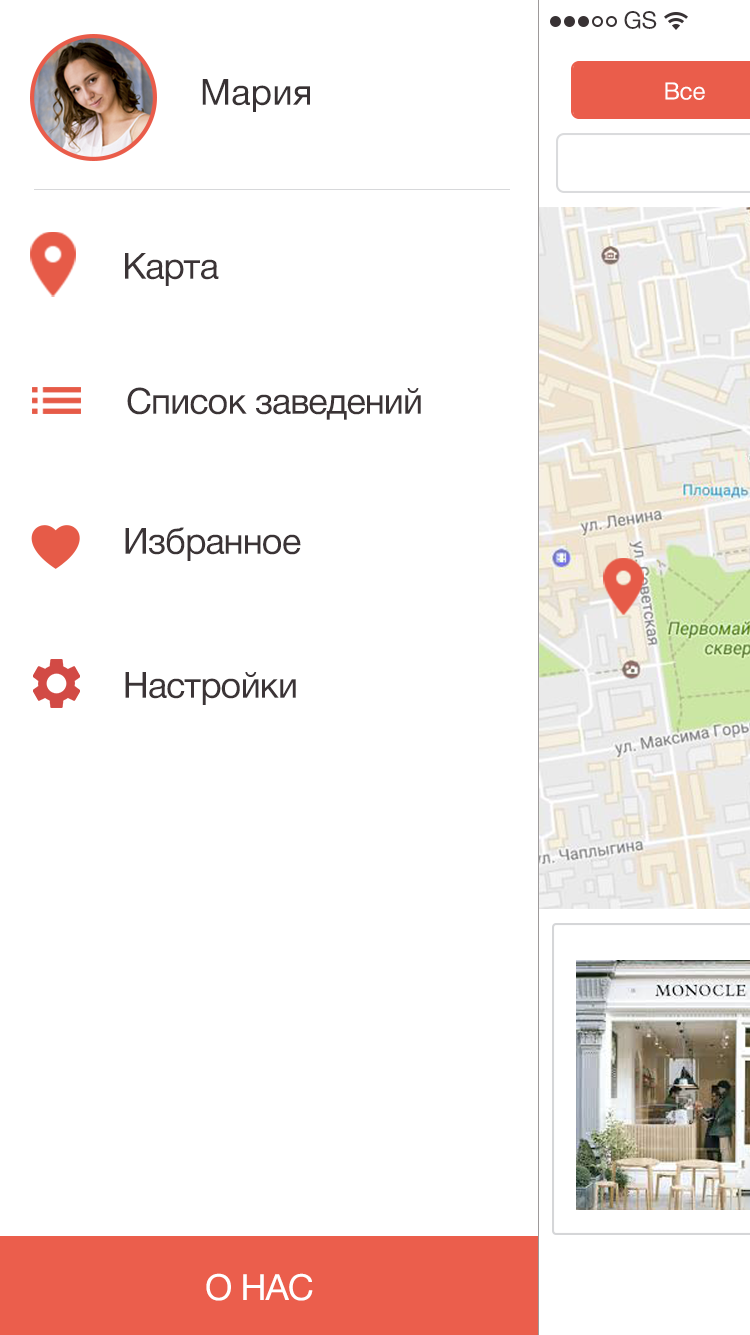
<style>
.page{position:relative;width:750px;height:1335px;background:#ffffff}
.page>*{position:absolute;margin:0}
.t1{font:24px "HelveticaNeueCyr-Roman";color:#383234}
.t2{font:36px "HelveticaNeueCyr-Roman";letter-spacing:0.016em;color:#383234}
.t3{font:24px "HelveticaNeueCyr-Roman";color:#ffffff}
.t4{font:36px "HelveticaNeueCyr-Roman";letter-spacing:-0.024em;color:#3b3436}
.t5{font:36px "HelveticaNeueCyr-Roman";letter-spacing:-0.024em;color:#ffffff}
</style>
<div class="page">
<p class="t1" style="left:624px;top:11px;width:33px;height:18px">GS</p>
<p class="t2" style="left:202px;top:79px;width:108px;height:33px">Мария</p>
<p class="t3" style="left:665px;top:82px;width:40px;height:18px">Все</p>
<p class="t4" style="left:125px;top:253px;width:94px;height:33px">Карта</p>
<p class="t4" style="left:127px;top:387px;width:294px;height:33px">Список заведений</p>
<p class="t4" style="left:125px;top:527px;width:176px;height:34px">Избранное</p>
<p class="t4" style="left:125px;top:672px;width:171px;height:33px">Настройки</p>
<p class="t5" style="left:206px;top:1273px;width:107px;height:28px">О НАС</p>
</div>
